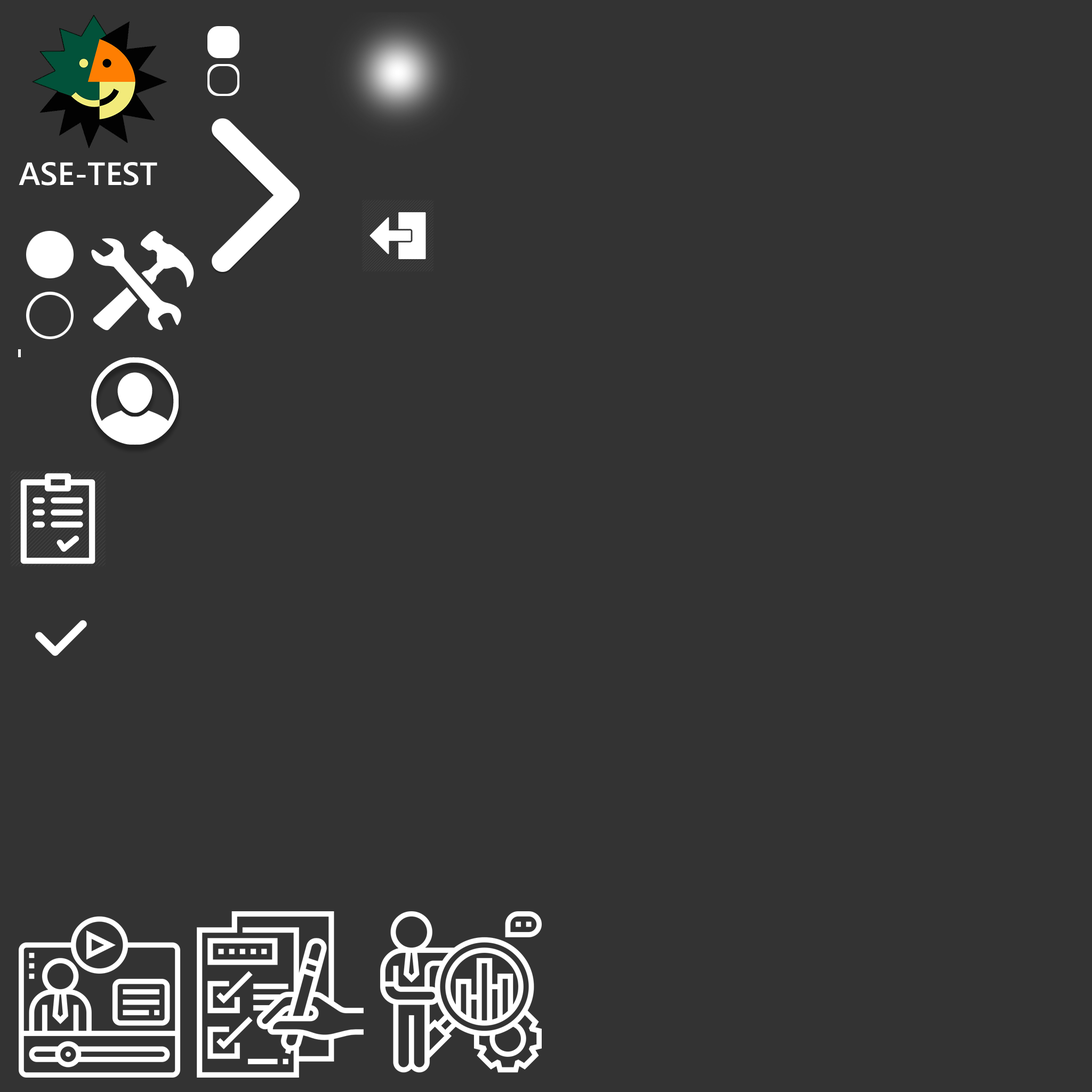
<style>
.page{position:relative;width:1092px;height:1092px;background:#333333}
.page>*{position:absolute;margin:0}
.t1{font:32.2px "YuGothicUI-Semibold";color:#ffffff}
</style>
<div class="page">
<p class="t1" style="left:19px;top:162px;width:138px;height:24px">ASE-TEST</p>
</div>
